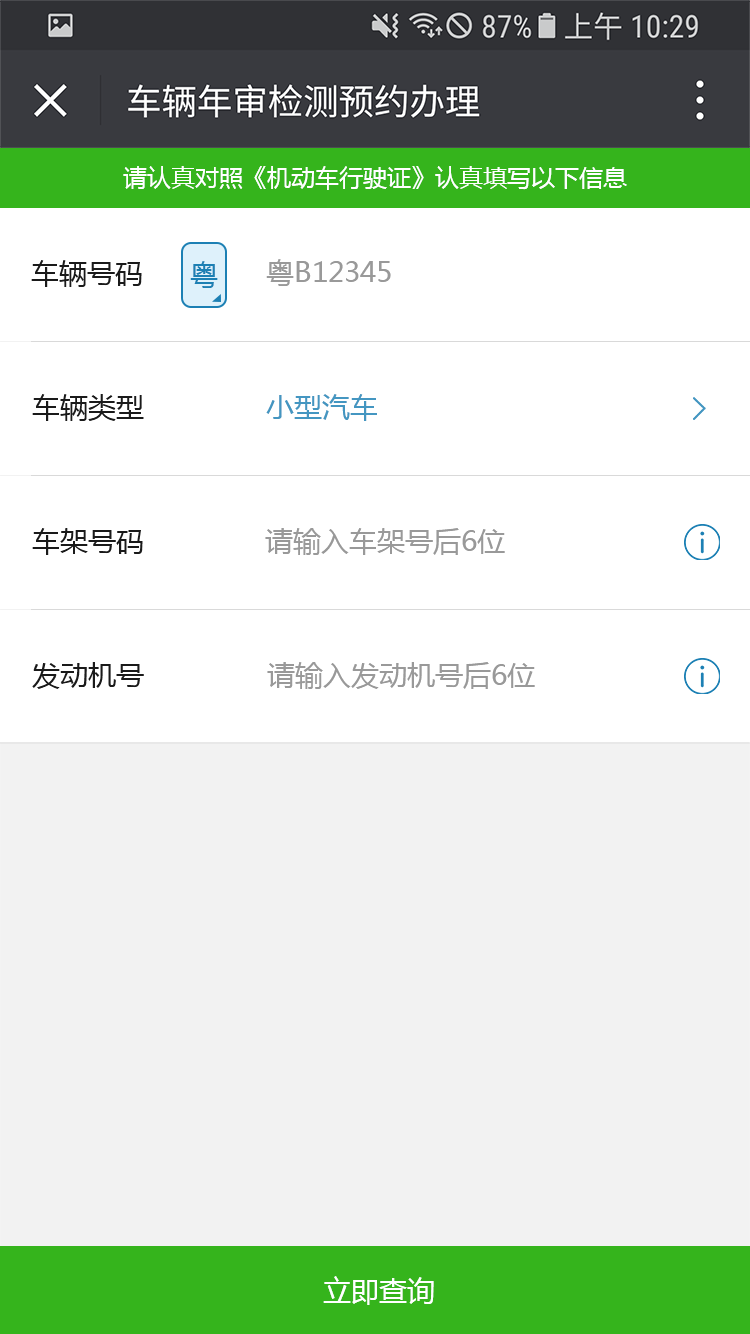
<style>
.page{position:relative;width:750px;height:1334px;background:#ffffff}
.page>*{position:absolute;margin:0}
.t1{font:24px "MicrosoftYaHei";color:#ffffff}
.t2{font:28px "MicrosoftYaHei";color:#1a1a1a}
.t3{font:28px "MicrosoftYaHei";color:#1c80b4}
.t4{font:28px "MicrosoftYaHei";color:#999999}
.t5{font:28px "MicrosoftYaHei";color:#4496c1}
.t6{font:28px "MicrosoftYaHei";color:#ffffff}
</style>
<div class="page">
<p class="t1" style="left:123px;top:166px;width:504px;height:24px">请认真对照《机动车行驶证》认真填写以下信息</p>
<p class="t2" style="left:31px;top:260px;width:111px;height:27px">车辆号码</p>
<p class="t3" style="left:190px;top:261px;width:28px;height:27px">粤</p>
<p class="t4" style="left:266px;top:259px;width:125px;height:27px">粤B12345</p>
<p class="t2" style="left:32px;top:394px;width:112px;height:27px">车辆类型</p>
<p class="t5" style="left:266px;top:394px;width:111px;height:27px">小型汽车</p>
<p class="t2" style="left:32px;top:528px;width:111px;height:27px">车架号码</p>
<p class="t4" style="left:265px;top:528px;width:240px;height:27px">请输入车架号后6位</p>
<p class="t2" style="left:32px;top:662px;width:112px;height:27px">发动机号</p>
<p class="t4" style="left:267px;top:662px;width:268px;height:27px">请输入发动机号后6位</p>
<p class="t6" style="left:323px;top:1276px;width:111px;height:29px">立即查询</p>
</div>
